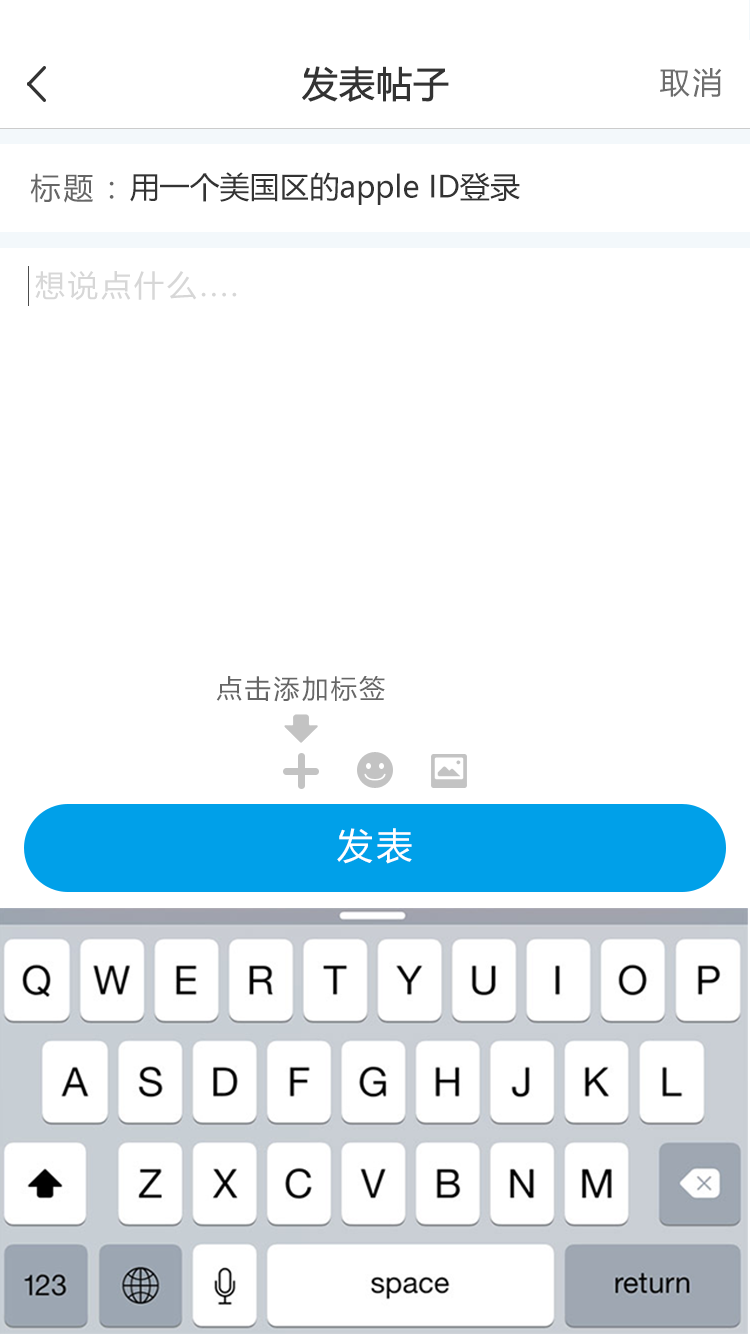
<style>
.page{position:relative;width:750px;height:1334px;background:#ffffff}
.page>*{position:absolute;margin:0}
.t1{font:36px "MicrosoftYaHei";color:#333333;font-weight:bold}
.t2{font:30px "MicrosoftYaHei";letter-spacing:0.1em;color:#6d6d6d}
.t3{font:30px "MicrosoftYaHei";letter-spacing:0.1em;color:#666666}
.t4{font:30px "MicrosoftYaHei";color:#333333}
.t5{font:30px "MicrosoftYaHei";letter-spacing:0.1em;color:#d7d7d7}
.t6{font:26px "MicrosoftYaHei";letter-spacing:0.1em;color:#666666}
.t7{font:36px "MicrosoftYaHei";letter-spacing:0.1em;color:#ffffff}
</style>
<div class="page">
<p class="t1" style="left:302px;top:66px;width:147px;height:36px">发表帖子</p>
<p class="t2" style="left:660px;top:68px;width:62px;height:29px">取消</p>
<p class="t3" style="left:30px;top:173px;width:84px;height:30px">标题：</p>
<p class="t4" style="left:130px;top:172px;width:390px;height:33px">用一个美国区的apple ID登录</p>
<p class="t5" style="left:35px;top:271px;width:202px;height:29px">想说点什么....</p>
<p class="t6" style="left:216px;top:676px;width:169px;height:26px">点击添加标签</p>
<p class="t7" style="left:337px;top:828px;width:75px;height:36px">发表</p>
</div>
